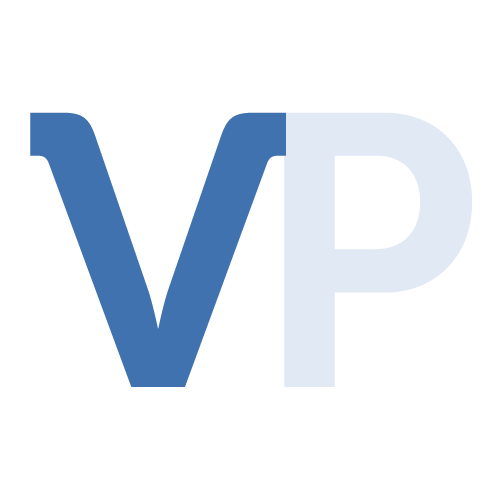
<style>
.page{position:relative;width:500px;height:500px;background:#ffffff}
.page>*{position:absolute;margin:0}
.t1{font:386.2px "Museo-700";color:#4072af}
.t2{font:386.2px "Museo-700";color:#e1e9f4}
</style>
<div class="page">
<p class="t1" style="left:30px;top:112px;width:256px;height:275px">V</p>
<p class="t2" style="left:259px;top:112px;width:213px;height:275px">P</p>
</div>
